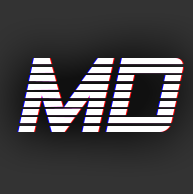
<style>
.page{position:relative;width:193px;height:194px}
.page>*{position:absolute;margin:0}
.t1{font:104.7px "SFAlienEncounters-Italic";color:#ffffff}
</style>
<div class="page">
<p class="t1" style="left:17px;top:58px;width:165px;height:74px">MD</p>
<p class="t1" style="left:18px;top:58px;width:165px;height:74px">MD</p>
<p class="t1" style="left:19px;top:58px;width:165px;height:74px">MD</p>
</div>
